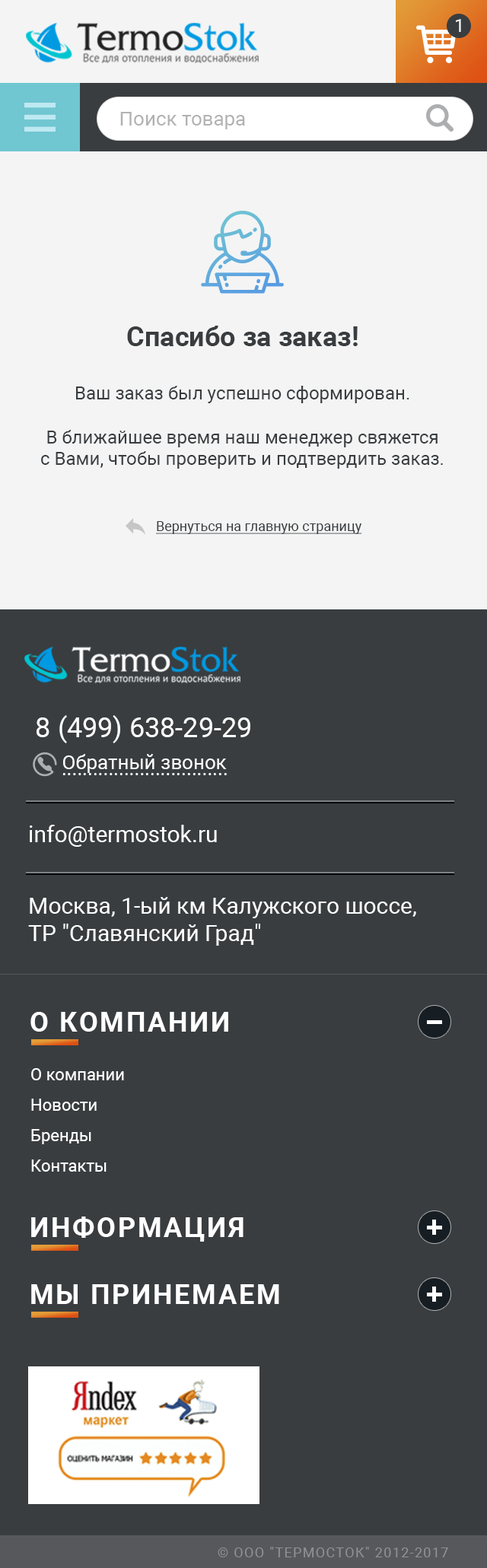
<style>
.page{position:relative;width:487px;height:1568px;background:#393d40}
.page>*{position:absolute;margin:0}
.t1{font:18.3px "Roboto-Regular";color:#ffffff}
.t2{font:19.8px "Roboto-Regular";color:#b2b2b2}
.t3{font:27.4px "Roboto-Bold";color:#393d40}
.t4{font:18.3px "Roboto-Regular";color:#393d40}
.t5{font:13.7px "Roboto-Regular";color:#393d40;text-decoration:underline}
.t6{font:27.4px "Roboto-Regular";color:#ffffff}
.t7{font:19.8px "Roboto-Regular";color:#ffffff}
.t8{font:22.8px "Roboto-Regular";color:#ffffff}
.t9{font:27.4px "Roboto-Bold";letter-spacing:0.075em;color:#ffffff;text-transform:uppercase}
.t10{font:16.7px/30.4px "Roboto-Regular";color:#ffffff}
.t11{font:13.7px "Roboto-Regular";letter-spacing:0.075em;color:#8e9092;text-transform:uppercase}
</style>
<div class="page">
<p class="t1" style="left:456px;top:19px;width:5px;height:13px">1</p>
<p class="t2" style="left:120px;top:112px;width:125px;height:17px">Поиск товара</p>
<p class="t3" style="left:127px;top:326px;width:231px;height:20px">Спасибо за заказ!</p>
<p class="t4" style="left:41px;top:386px;width:402px;height:83px;text-align:center">Ваш заказ был успешно сформирован.<br><br>В ближайшее время наш менеджер свяжется<br>с Вами, чтобы проверить и подтвердить заказ.</p>
<p class="t5" style="left:156px;top:521px;width:206px;height:13px">Вернуться на главную страницу</p>
<p class="t6" style="left:37px;top:715px;width:213px;height:28px">8 (499) 638-29-29</p>
<p class="t7" style="left:63px;top:754px;width:164px;height:19px">Обратный звонок</p>
<p class="t7" style="left:62px;top:773px;width:165px;height:2px">................................</p>
<p class="t8" style="left:30px;top:825px;width:187px;height:22px">info@termostok.ru</p>
<p class="t8" style="left:28px;top:897px;width:388px;height:49px">Москва, 1-ый км Калужского шоссе, <br>ТР "Славянский Град"</p>
<p class="t9" style="left:30px;top:1012px;width:198px;height:20px">О КОМПАНИИ</p>
<p class="t10" style="left:31px;top:1068px;width:93px;height:104px">О компании<br>Новости<br>Бренды<br>Контакты</p>
<p class="t9" style="left:31px;top:1217px;width:212px;height:25px">Информация</p>
<p class="t9" style="left:31px;top:1284px;width:248px;height:20px">Мы принемаем</p>
<p class="t11" style="left:218px;top:1547px;width:230px;height:10px">© ООО "Термосток" 2012-2017</p>
</div>
